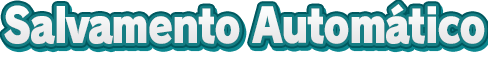
<style>
.page{position:relative;width:488px;height:60px;background:#ffffff}
.page>*{position:absolute;margin:0}
.t1{font:46.9px "RodinPro-UB";letter-spacing:-0.038em;color:#efeff0;scale:0.85 1}
</style>
<div class="page">
<p class="t1" style="left:4px;top:4px;width:481px;height:40px">Salvamento Automático</p>
</div>
